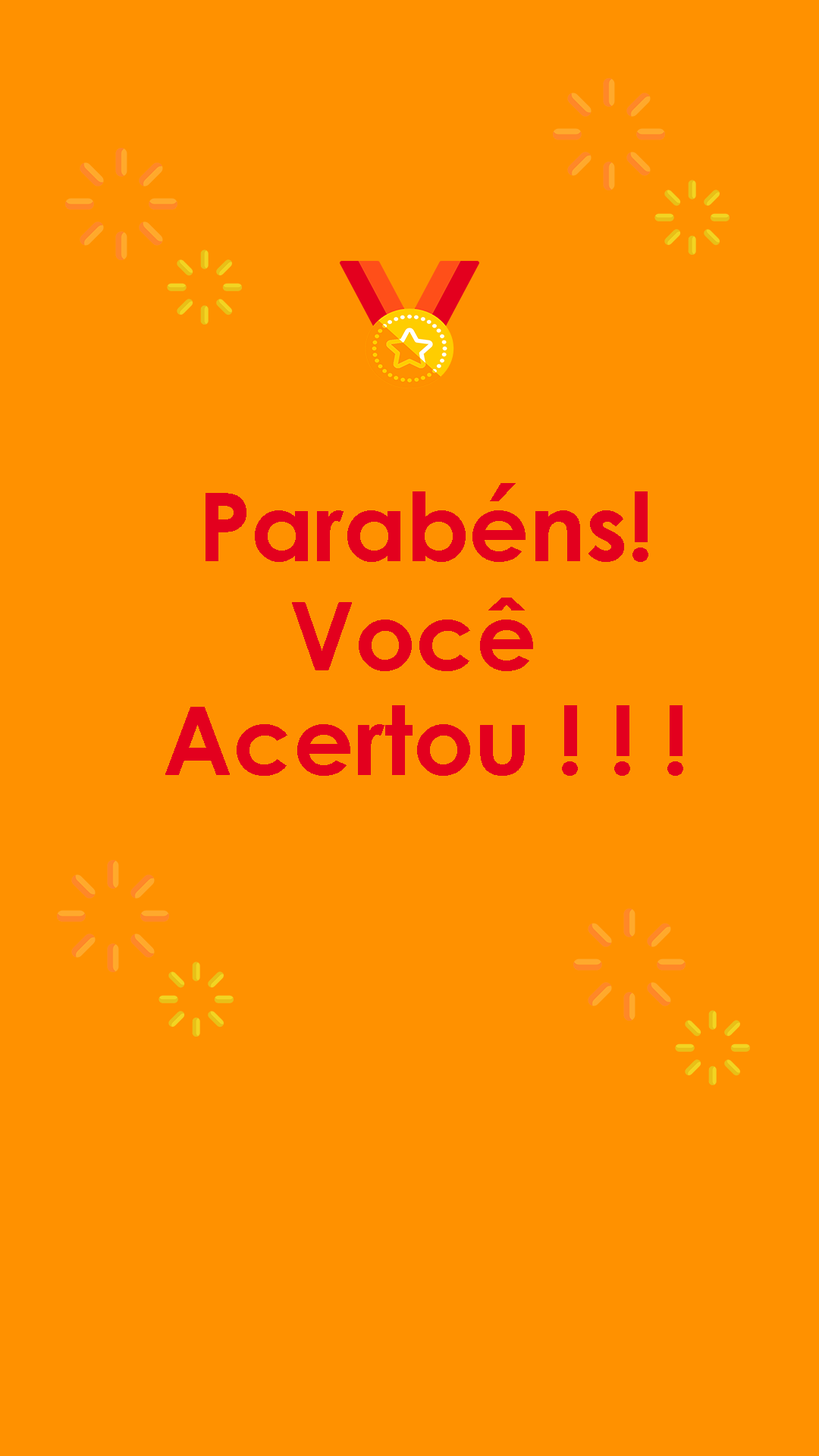
<style>
.page{position:relative;width:819px;height:1456px;background:#ff9100}
.page>*{position:absolute;margin:0}
.t1{font:94.8px/4.5px "CenturyGothic-Bold";color:#e3001e}
</style>
<div class="page">
<p class="t1" style="left:165px;top:483px;width:518px;height:293px;text-align:center">Parabéns!<br><br><br><br><br><br><br><br><br><br><br><br><br><br><br><br><br><br><br><br><br><br><br><br>Você <br><br><br><br><br><br><br><br><br><br><br><br><br><br><br><br><br><br><br><br><br><br><br>Acertou ! ! !</p>
</div>
